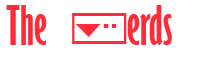
<style>
.page{position:relative;width:200px;height:60px;background:#ffffff}
.page>*{position:absolute;margin:0}
.t1{font:50px "GillSansMT-ExtraCondensedBold";color:#fc2c38}
.t2{font:50px "MSOutlook";color:#fc2c38}
</style>
<div class="page">
<p class="t1" style="left:6px;top:5px;width:166px;height:40px">The<span class="t2"> N</span>erds</p>
</div>
